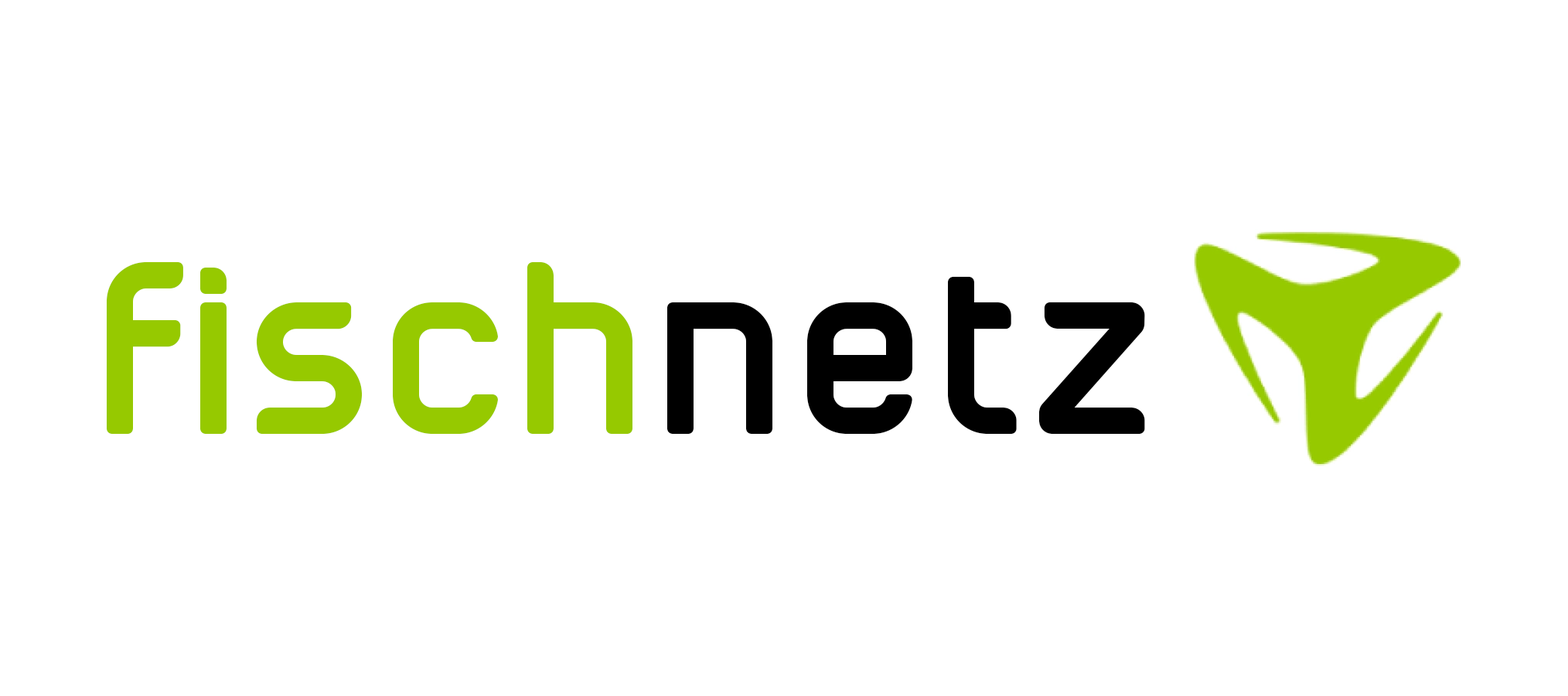
<style>
.page{position:relative;width:1568px;height:696px;background:#ffffff}
.page>*{position:absolute;margin:0}
.t1{font:232.4px "cuyabra-Bold";color:#96c900}
.t2{font:232.4px "cuyabra-Bold";color:#000000}
</style>
<div class="page">
<p class="t1" style="left:107px;top:261px;width:1038px;height:173px">fisch<span class="t2">netz</span></p>
</div>
